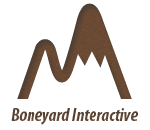
<style>
.page{position:relative;width:150px;height:130px;background:#ffffff}
.page>*{position:absolute;margin:0}
.t1{font:18px "MyriadPro-BoldCondIt";color:#5a4433}
</style>
<div class="page">
<p class="t1" style="left:11px;top:108px;width:127px;height:17px">Boneyard Interactive</p>
</div>
